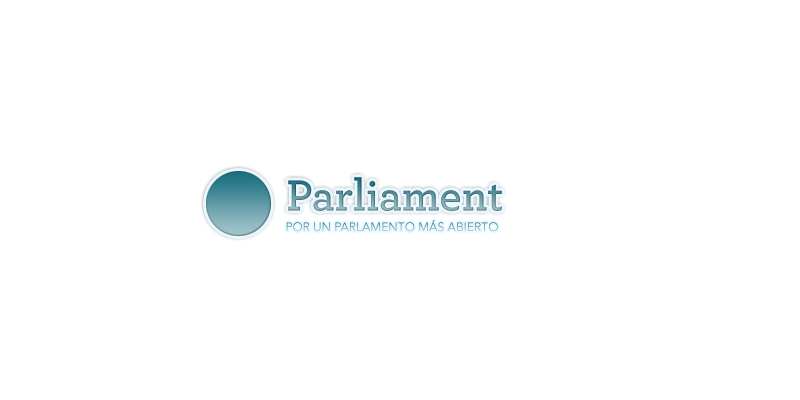
<style>
.page{position:relative;width:800px;height:400px;background:#ffffff}
.page>*{position:absolute;margin:0}
.t1{font:45.5px "Archer-Semibold"}
.t2{font:12.1px "AvenirLTStd-Book";color:#2f7c8b;text-transform:uppercase}
</style>
<div class="page">
<p class="t1" style="left:288px;top:177px;width:214px;height:34px">Parliament</p>
<p class="t2" style="left:286px;top:220px;width:212px;height:12px">Por un parlamento más abierto</p>
</div>
